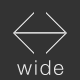
<style>
.page{position:relative;width:80px;height:80px;background:#333333}
.page>*{position:absolute;margin:0}
.t1{font:20.2px "HelveticaNeueLight";letter-spacing:0.1em;color:#e6e6e6}
</style>
<div class="page">
<p class="t1" style="left:17px;top:60px;width:47px;height:15px">wide</p>
</div>
